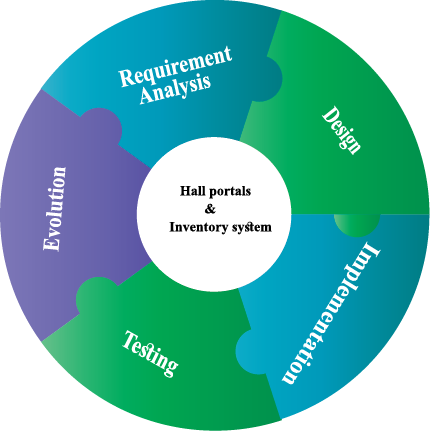
<style>
.page{position:relative;width:430px;height:431px;background:#ffffff}
.page>*{position:absolute;margin:0}
.t1{font:24px/21px "TimesNewRomanPS-BoldMT";color:#ffffff;scale:0.86 1}
.t2{font:24px "TimesNewRomanPS-BoldMT";color:#ffffff;scale:0.73 1}
.t3{font:22.9px "TimesNewRomanPS-BoldMT";color:#ffffff;scale:0.9 1}
.t4{font:14px/18px "TimesNewRomanPS-BoldMT";color:#000000}
.t5{font:24px "TimesNewRomanPS-BoldMT";color:#ffffff}
.t6{font:24.2px "TimesNewRomanPS-BoldMT";color:#ffffff;scale:0.85 1}
</style>
<div class="page">
<p class="t1" style="left:118px;top:45px;width:115px;height:60px;rotate:-14deg">Requirement <br>   Analysis</p>
<p class="t2" style="left:321px;top:105px;width:40px;height:50px;rotate:52deg">Design</p>
<p class="t3" style="left:43px;top:167px;width:23px;height:85px;rotate:-85deg">Evolution</p>
<p class="t4" style="left:169px;top:186px;width:103px;height:49px">Hall portals<br>          &amp;<br>Inventory system</p>
<p class="t5" style="left:281px;top:241px;width:100px;height:144px;rotate:122deg">Implementation</p>
<p class="t6" style="left:122px;top:330px;width:57px;height:48px;rotate:29deg">Testing</p>
</div>
